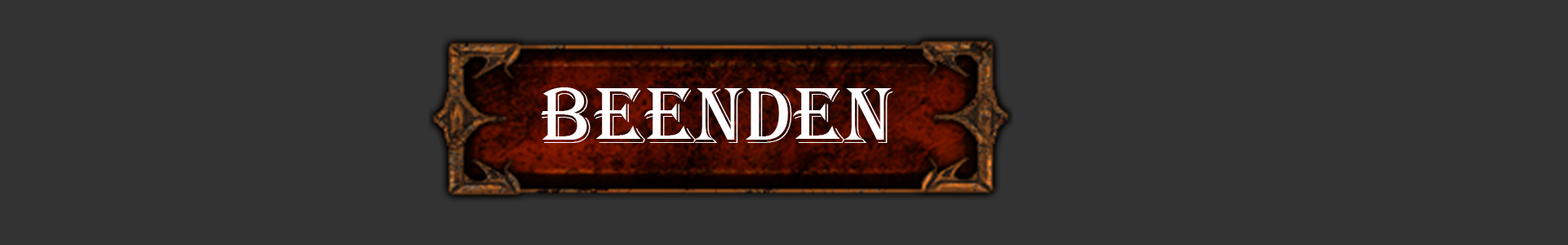
<style>
.page{position:relative;width:1568px;height:245px;background:#333333}
.page>*{position:absolute;margin:0}
.t1{font:81.7px "Algerian";color:#fefefe}
</style>
<div class="page">
<p class="t1" style="left:541px;top:87px;width:352px;height:56px">Beenden</p>
</div>
